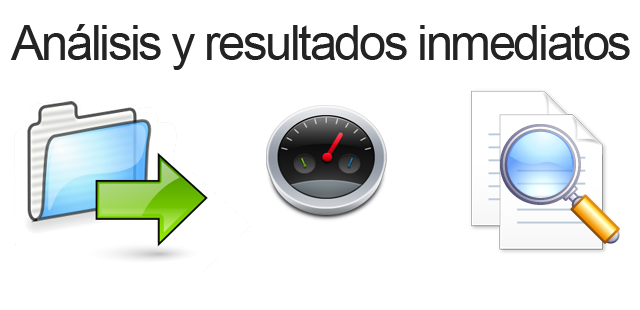
<style>
.page{position:relative;width:640px;height:310px;background:#ffffff}
.page>*{position:absolute;margin:0}
.t1{font:48px "ArialMT";letter-spacing:-0.05em;color:#232323}
</style>
<div class="page">
<p class="t1" style="left:10px;top:24px;width:620px;height:46px">Análisis y resultados inmediatos</p>
</div>
